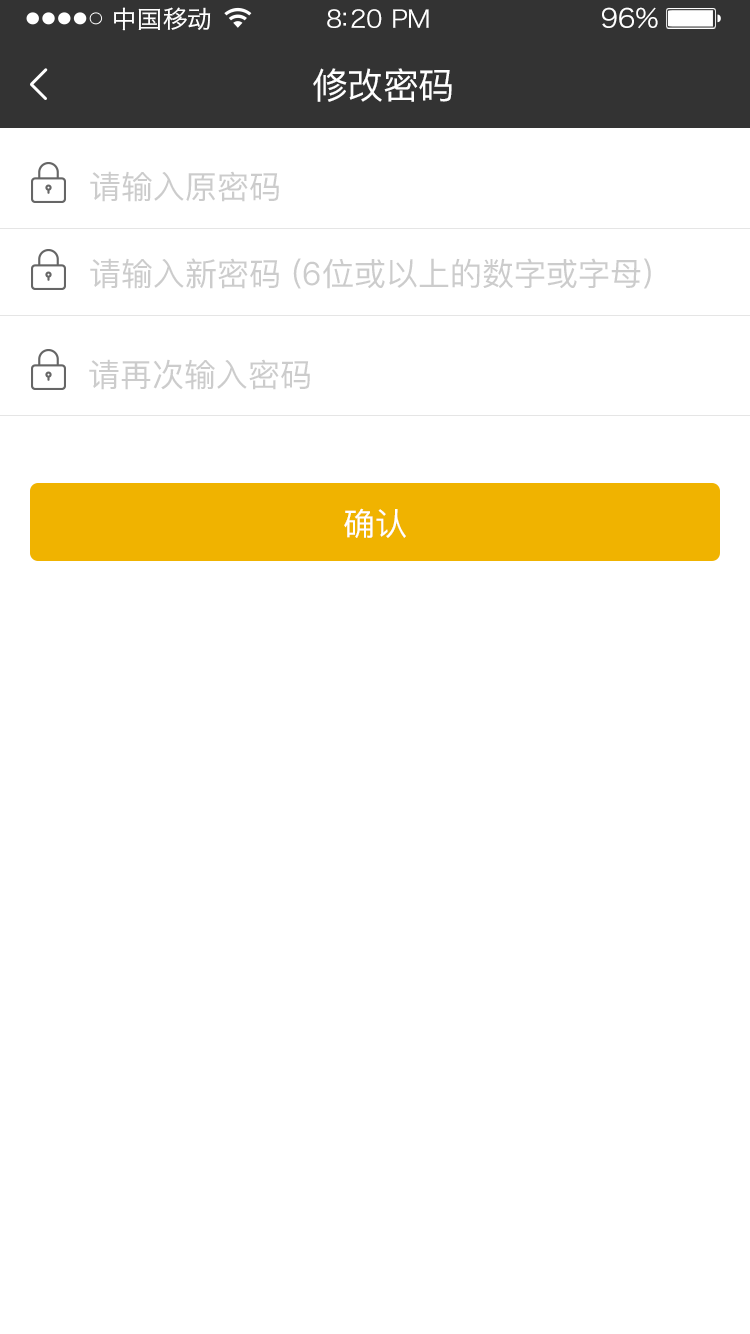
<style>
.page{position:relative;width:750px;height:1334px;background:#ffffff}
.page>*{position:absolute;margin:0}
.t1{font:24px "HiraginoSansGB-W3";letter-spacing:0.02em;color:#ffffff;scale:1.03 1}
.t2{font:24px "HiraginoSansGB-W3";letter-spacing:-0.02em;color:#ffffff;scale:1.03 1}
.t3{font:26.2px "HiraginoSansGB-W3";letter-spacing:-0.02em;color:#ffffff;scale:1.03 1}
.t4{font:36px "PingFang-SC-Medium";letter-spacing:-0.02em;color:#ffffff}
.t5{font:32px "PingFang-SC-Medium";color:#cccccc}
.t6{font:32px "PingFang-SC-Medium";color:#ffffff}
</style>
<div class="page">
<p class="t1" style="left:114px;top:7px;width:97px;height:24px">中国移动</p>
<p class="t2" style="left:327px;top:9px;width:102px;height:19px">8:20 PM</p>
<p class="t3" style="left:602px;top:7px;width:56px;height:22px">96%</p>
<p class="t4" style="left:313px;top:68px;width:139px;height:34px">修改密码</p>
<p class="t5" style="left:90px;top:171px;width:189px;height:31px">请输入原密码</p>
<p class="t5" style="left:90px;top:258px;width:561px;height:31px">请输入新密码 (6位或以上的数字或字母)</p>
<p class="t5" style="left:89px;top:359px;width:221px;height:31px">请再次输入密码</p>
<p class="t6" style="left:344px;top:508px;width:62px;height:30px">确认</p>
</div>
